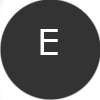
<style>
.page{position:relative;width:100px;height:100px;background:#333333}
.page>*{position:absolute;margin:0}
.t1{font:36px "Verdana";color:#ffffff}
</style>
<div class="page">
<p class="t1" style="left:40px;top:29px;width:18px;height:26px">E</p>
</div>
